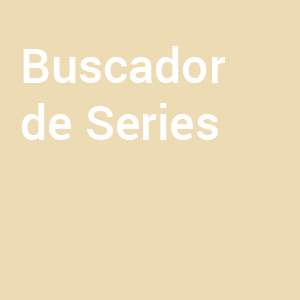
<style>
.page{position:relative;width:300px;height:300px;background:#eddbb4}
.page>*{position:absolute;margin:0}
.t1{font:48px "Roboto-Medium";color:#ffffff}
</style>
<div class="page">
<p class="t1" style="left:22px;top:46px;width:204px;height:94px">Buscador de Series</p>
</div>
